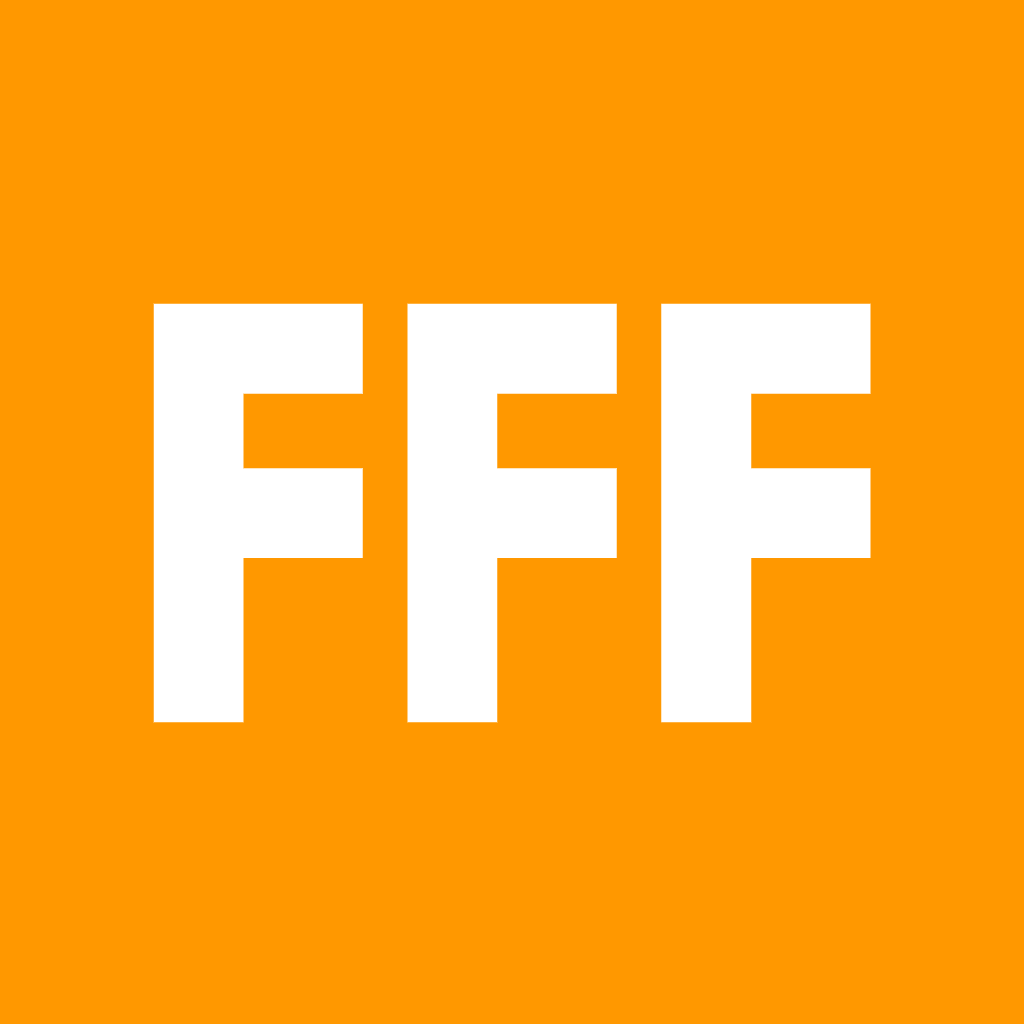
<style>
.page{position:relative;width:1024px;height:1024px;background:#ff9800}
.page>*{position:absolute;margin:0}
.t1{font:597.5px "SFCollegiateSolid";color:#ffffff}
</style>
<div class="page">
<p class="t1" style="left:153px;top:303px;width:718px;height:420px">FFF</p>
</div>
